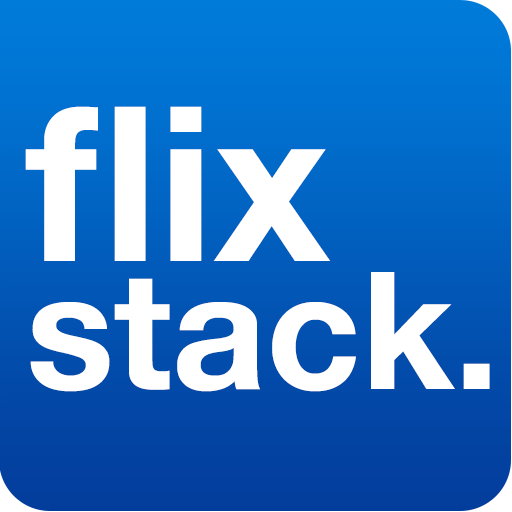
<style>
.page{position:relative;width:512px;height:512px}
.page>*{position:absolute;margin:0}
.t1{font:164px/128px "HelveticaNeue-Bold";color:#ffffff}
.t2{font:216px/164px "HelveticaNeue-Bold";color:#ffffff}
</style>
<div class="page">
<p class="t1" style="left:25px;top:106px;width:465px;height:286px"><span class="t2">flix<br></span>stack.</p>
</div>
